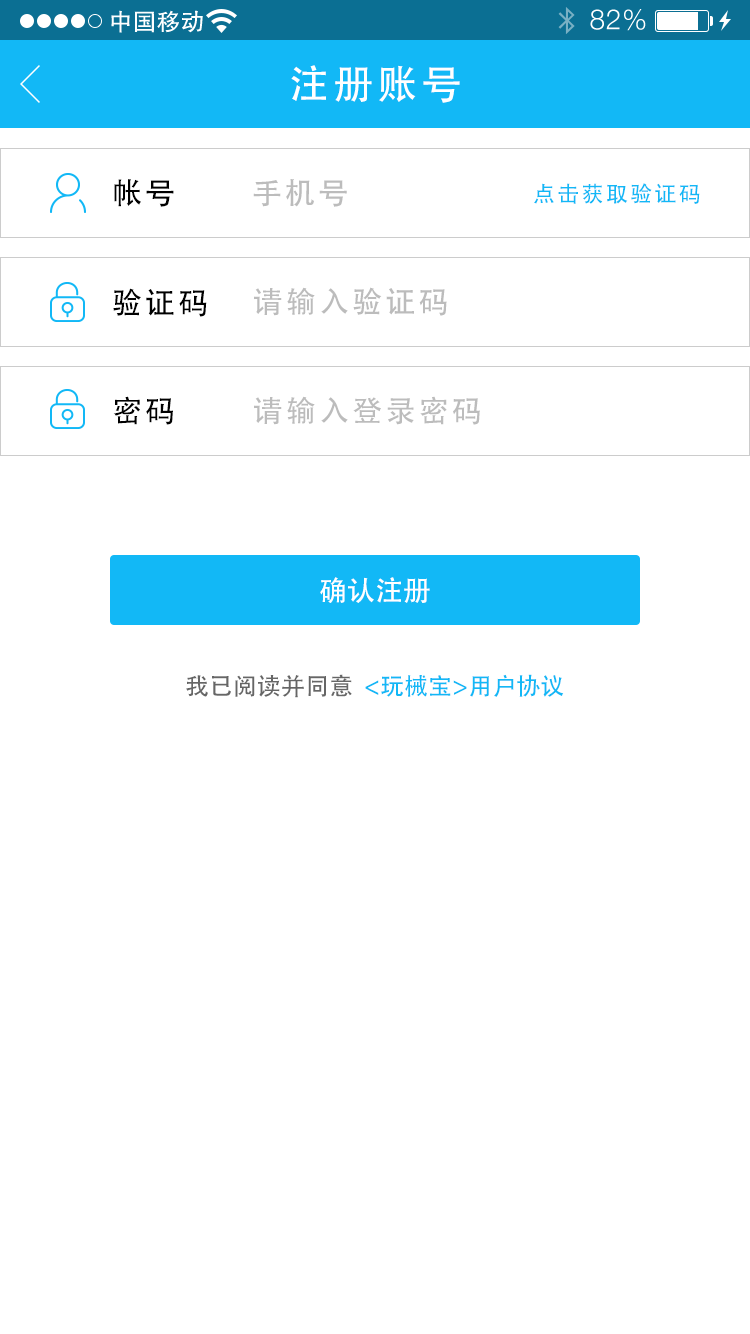
<style>
.page{position:relative;width:750px;height:1334px;background:#ffffff}
.page>*{position:absolute;margin:0}
.t1{font:40px "AdobeHeitiStd-Regular";letter-spacing:0.104em;color:#ffffff}
.t2{font:30px "AdobeHeitiStd-Regular";letter-spacing:0.104em;color:#000000}
.t3{font:30px "AdobeHeitiStd-Regular";letter-spacing:0.104em;color:#bcbcbc}
.t4{font:22px "AdobeHeitiStd-Regular";letter-spacing:0.104em;color:#12b8f6}
.t5{font:28px "AdobeHeitiStd-Regular";color:#ffffff}
.t6{font:24px "AdobeHeitiStd-Regular";color:#12b8f6}
.t7{font:24px "AdobeHeitiStd-Regular";color:#666666}
</style>
<div class="page">
<p class="t1" style="left:291px;top:65px;width:169px;height:38px">注册账号</p>
<p class="t2" style="left:114px;top:179px;width:60px;height:28px">帐号</p>
<p class="t3" style="left:253px;top:179px;width:94px;height:28px">手机号</p>
<p class="t4" style="left:534px;top:183px;width:166px;height:21px">点击获取验证码</p>
<p class="t2" style="left:113px;top:288px;width:94px;height:29px">验证码</p>
<p class="t3" style="left:254px;top:287px;width:193px;height:29px">请输入验证码</p>
<p class="t2" style="left:113px;top:396px;width:60px;height:29px">密码</p>
<p class="t3" style="left:254px;top:396px;width:226px;height:29px">请输入登录密码</p>
<p class="t5" style="left:320px;top:577px;width:110px;height:26px">确认注册</p>
<p class="t6" style="left:186px;top:674px;width:378px;height:24px"><span class="t7">我已阅读并同意 </span> &lt;玩械宝&gt;用户协议</p>
</div>
